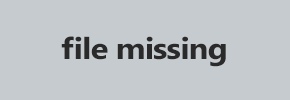
<style>
.page{position:relative;width:290px;height:100px;background:#c6cbcf}
.page>*{position:absolute;margin:0}
.t1{font:30px "SegoeUI-Bold";letter-spacing:-0.03em;color:#2a2a2a;scale:1.1 1}
</style>
<div class="page">
<p class="t1" style="left:61px;top:36px;width:165px;height:31px">file missing</p>
</div>
